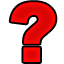
<style>
.page{position:relative;width:64px;height:64px;background:#ffffff}
.page>*{position:absolute;margin:0}
.t1{font:82px "Arial-Black";color:#e90606}
</style>
<div class="page">
<p class="t1" style="left:10px;top:2px;width:46px;height:60px">?</p>
</div>
